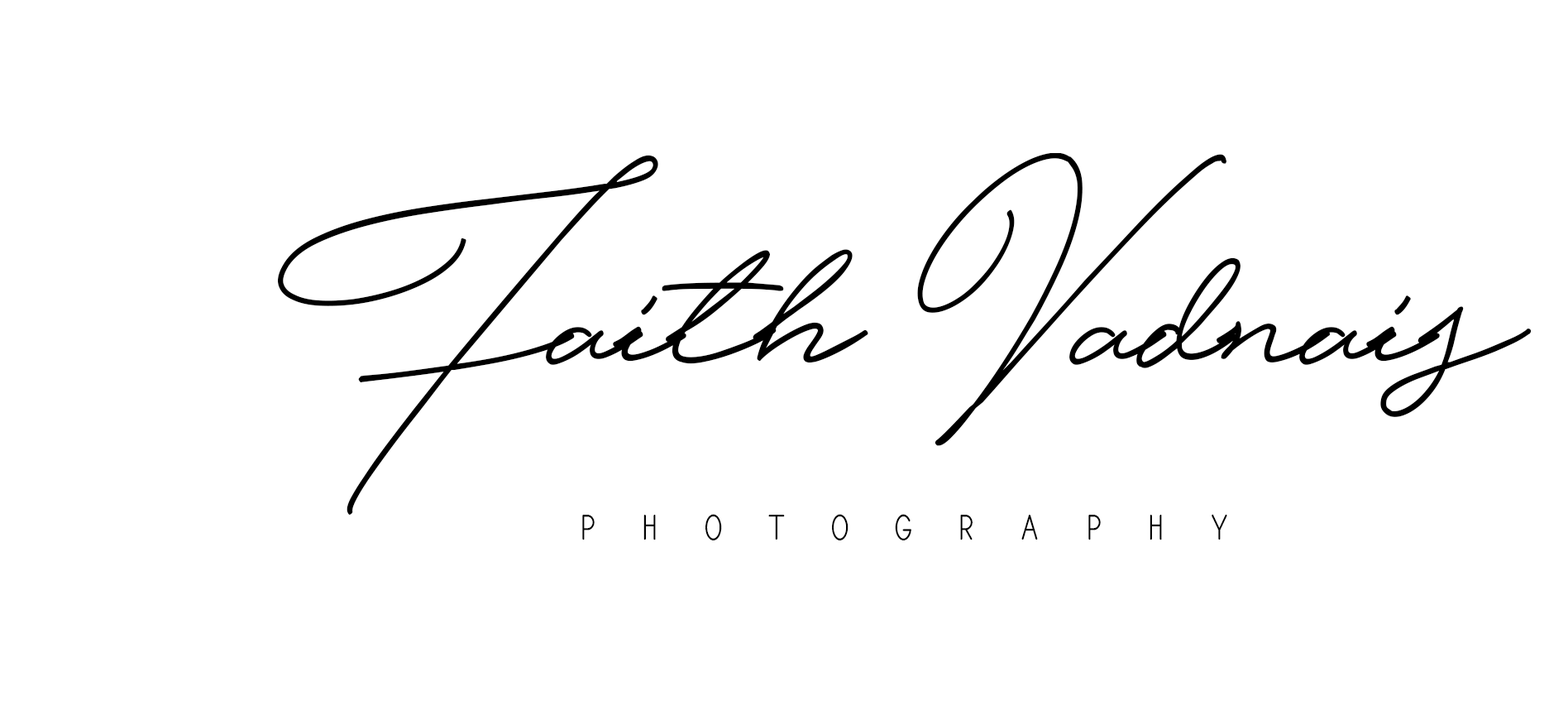
<style>
.page{position:relative;width:1568px;height:715px;background:#ffffff}
.page>*{position:absolute;margin:0}
.t1{font:218.6px "HijrnotesPERSONALUSEONLY";letter-spacing:-0.04em;color:#000000;scale:0.9 1}
.t2{font:59.5px "MonogramFramer-Demo";letter-spacing:-0.04em;color:#000000;scale:0.9 1}
</style>
<div class="page">
<p class="t1" style="left:278px;top:152px;width:1254px;height:362px">Faith Vadnais</p>
<p class="t2" style="left:582px;top:514px;width:645px;height:26px">Photography</p>
</div>
